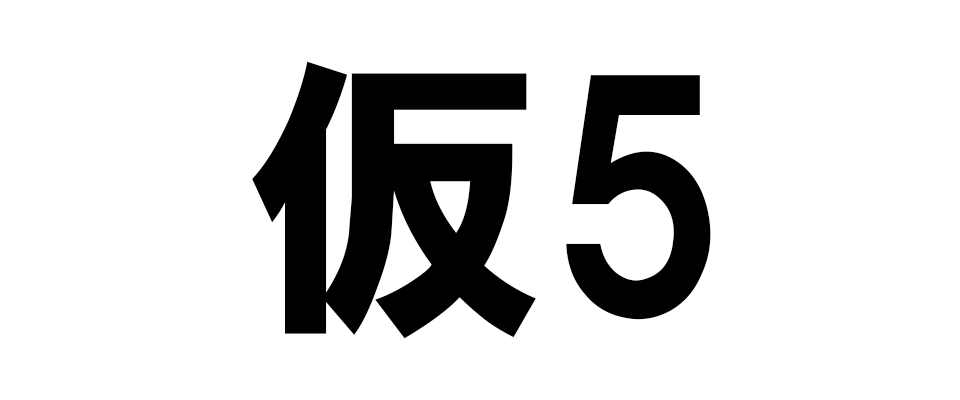
<style>
.page{position:relative;width:960px;height:400px;background:#ffffff}
.page>*{position:absolute;margin:0}
.t1{font:300px "HGSSoeiKakugothicUB";color:#000000}
</style>
<div class="page">
<p class="t1" style="left:252px;top:61px;width:459px;height:278px">仮5</p>
</div>
